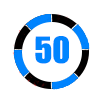
<style>
.page{position:relative;width:103px;height:103px;background:#ffffff}
.page>*{position:absolute;margin:0}
.t1{font:33.3px "Impact";color:#0084ff}
</style>
<div class="page">
<p class="t1" style="left:35px;top:36px;width:34px;height:28px">50</p>
</div>
